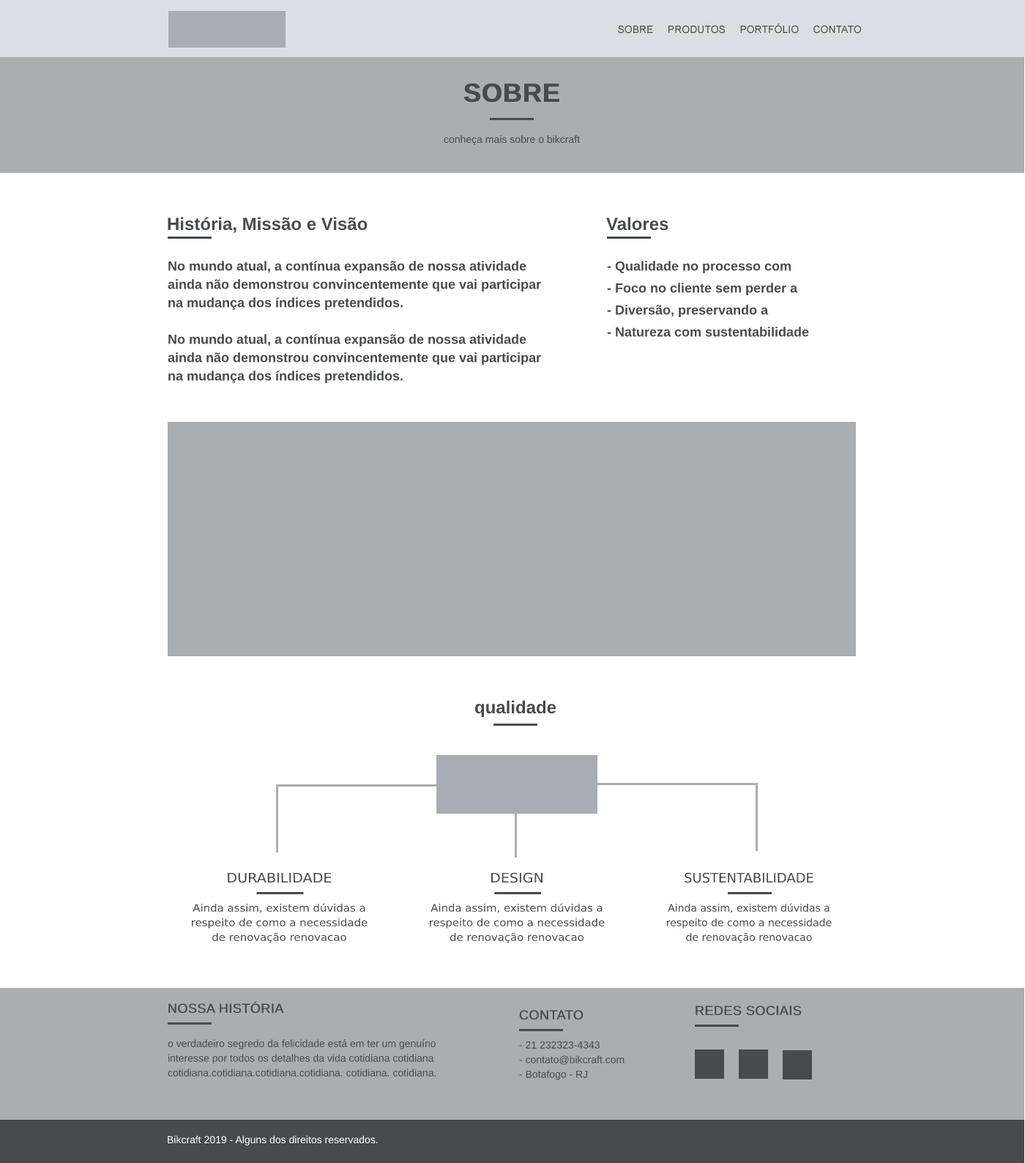
<style>
.page{position:relative;width:1025px;height:1163px;background:#ffffff}
.page>*{position:absolute;margin:0}
.t1{font:10.3px "ArialMT";color:#484b4d;text-transform:uppercase}
.t2{font:26.4px "Arial-BoldMT";color:#484b4d;text-transform:uppercase;font-weight:bold}
.t3{font:10.3px "ArialMT";color:#484b4d}
.t4{font:17.6px "Arial-BoldMT";color:#484b4d}
.t5{font:13.2px/18.3px "Arial-BoldMT";color:#484b4d}
.t6{font:13.2px/22px "Arial-BoldMT";color:#484b4d}
.t7{font:13.2px "DejaVuSans";color:#484b4d;scale:1.07 1}
.t8{font:13.2px "DejaVuSans";color:#484b4d;scale:1.06 1}
.t9{font:13.2px "DejaVuSans";color:#484b4d}
.t10{font:10.3px/14.6px "DejaVuSans";color:#484b4d;scale:1.07 1}
.t11{font:10.3px/14.6px "DejaVuSans";color:#484b4d;scale:1.06 1}
.t12{font:10.3px/14.6px "DejaVuSans";color:#484b4d}
.t13{font:13.2px "ArialMT";color:#484b4d;font-weight:bold}
.t14{font:10.3px/14.6px "ArialMT";color:#484b4d}
.t15{font:10.3px "ArialMT";color:#ffffff}
</style>
<div class="page">
<p class="t1" style="left:618px;top:23px;width:243px;height:11px">Sobre     Produtos     PORTFÓLIO     Contato</p>
<p class="t2" style="left:464px;top:83px;width:96px;height:20px">Sobre</p>
<p class="t3" style="left:444px;top:135px;width:136px;height:10px">conheça mais sobre o bikcraft</p>
<p class="t4" style="left:168px;top:217px;width:200px;height:16px">História, Missão e Visão</p>
<p class="t4" style="left:606px;top:217px;width:63px;height:14px">Valores</p>
<p class="t5" style="left:168px;top:261px;width:373px;height:123px">No mundo atual, a contínua expansão de nossa atividade ainda não demonstrou convincentemente que vai participar na mudança dos índices pretendidos.<br><br>No mundo atual, a contínua expansão de nossa atividade ainda não demonstrou convincentemente que vai participar na mudança dos índices pretendidos.</p>
<p class="t6" style="left:607px;top:261px;width:202px;height:76px">- Qualidade no processo com<br>- Foco no cliente sem perder a<br>- Diversão, preservando a<br>- Natureza com sustentabilidade</p>
<p class="t4" style="left:475px;top:700px;width:82px;height:17px">qualidade</p>
<p class="t7" style="left:228px;top:872px;width:104px;height:11px">DURABILIDADE</p>
<p class="t8" style="left:491px;top:872px;width:52px;height:11px">DESIGN</p>
<p class="t9" style="left:685px;top:872px;width:129px;height:11px">SUSTENTABILIDADE</p>
<p class="t10" style="left:192px;top:903px;width:176px;height:40px;text-align:center">Ainda assim, existem dúvidas a respeito de como a necessidade de renovação renovacao</p>
<p class="t11" style="left:430px;top:903px;width:175px;height:40px;text-align:center">Ainda assim, existem dúvidas a respeito de como a necessidade de renovação renovacao</p>
<p class="t12" style="left:667px;top:903px;width:165px;height:40px;text-align:center">Ainda assim, existem dúvidas a respeito de como a necessidade de renovação renovacao</p>
<p class="t13" style="left:168px;top:1001px;width:116px;height:13px">NOSSA HISTÓRIA</p>
<p class="t13" style="left:519px;top:1010px;width:65px;height:10px">CONTATO</p>
<p class="t13" style="left:696px;top:1006px;width:106px;height:10px">REDES SOCIAIS</p>
<p class="t14" style="left:168px;top:1039px;width:268px;height:38px">o verdadeiro segredo da felicidade está em ter um genuíno interesse por todos os detalhes da vida cotidiana cotidiana  cotidiana.cotidiana.cotidiana.cotidiana. cotidiana. cotidiana.</p>
<p class="t14" style="left:519px;top:1041px;width:106px;height:39px">- 21 232323-4343<br>- contato@bikcraft.com<br>- Botafogo - RJ</p>
<p class="t15" style="left:168px;top:1135px;width:210px;height:10px">Bikcraft 2019 - Alguns dos direitos reservados.</p>
</div>
